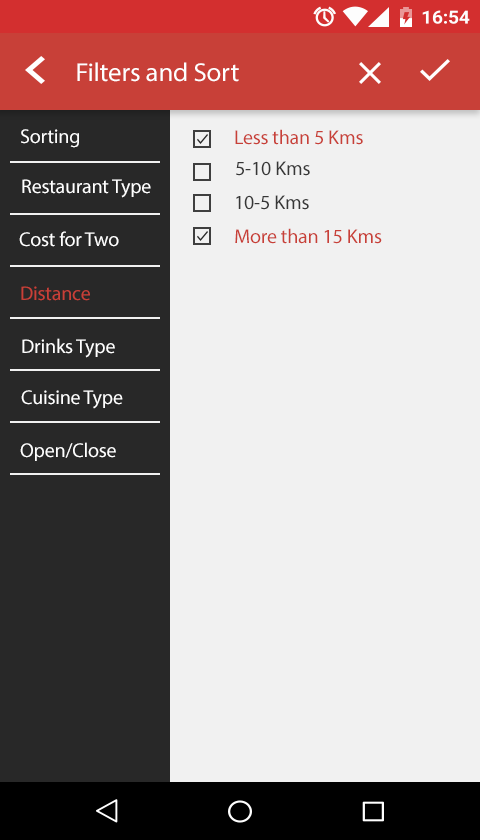
<style>
.page{position:relative;width:480px;height:840px;background:#f1f1f1}
.page>*{position:absolute;margin:0}
.t1{font:26.1px "MyriadPro-Regular";letter-spacing:-0.01em;color:#ffffff;scale:1.03 1}
.t2{font:20px "MyriadPro-Regular";letter-spacing:-0.01em;color:#fefefe}
.t3{font:20px "MyriadPro-Regular";letter-spacing:-0.01em;color:#c94038}
.t4{font:20px "MyriadPro-Regular";letter-spacing:-0.01em;color:#373737}
.t5{font:20px "MyriadPro-Regular";letter-spacing:-0.01em;color:#ffffff}
</style>
<div class="page">
<p class="t1" style="left:77px;top:62px;width:162px;height:20px">Filters and Sort</p>
<p class="t2" style="left:21px;top:129px;width:58px;height:19px">Sorting</p>
<p class="t3" style="left:235px;top:129px;width:128px;height:16px">Less than 5 Kms</p>
<p class="t4" style="left:236px;top:161px;width:74px;height:15px">5-10 Kms</p>
<p class="t5" style="left:22px;top:179px;width:129px;height:19px">Restaurant Type</p>
<p class="t4" style="left:236px;top:195px;width:73px;height:15px">10-5 Kms</p>
<p class="t5" style="left:19px;top:231px;width:100px;height:16px">Cost for Two</p>
<p class="t3" style="left:235px;top:228px;width:147px;height:16px">More than 15 Kms</p>
<p class="t3" style="left:21px;top:286px;width:69px;height:15px">Distance</p>
<p class="t5" style="left:22px;top:338px;width:93px;height:20px">Drinks Type</p>
<p class="t5" style="left:21px;top:390px;width:102px;height:19px">Cuisine Type</p>
<p class="t5" style="left:20px;top:442px;width:96px;height:19px">Open/Close</p>
</div>
